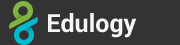
<style>
.page{position:relative;width:180px;height:45px;background:#333333}
.page>*{position:absolute;margin:0}
.t1{font:25px "Roboto-Bold";color:#f7f6f6}
</style>
<div class="page">
<p class="t1" style="left:48px;top:13px;width:89px;height:25px">Edulogy</p>
</div>
